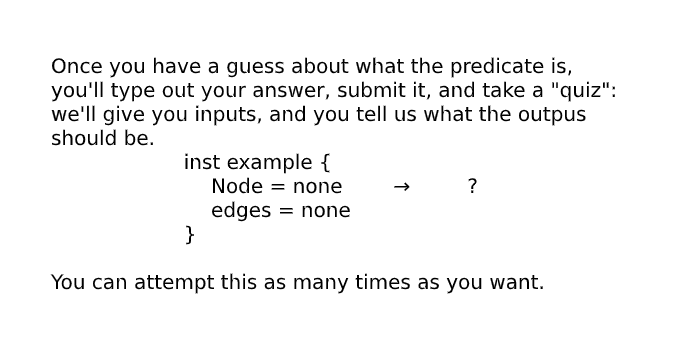
<style>
.page{position:relative;width:700px;height:350px;background:#ffffff}
.page>*{position:absolute;margin:0}
.t1{font:20px "DejaVuSans";color:#000000}
</style>
<div class="page">
<p class="t1" style="left:50px;top:57px;width:565px;height:237px">Once you have a guess about what the predicate is, <br>you'll type out your answer, submit it, and take a "quiz": <br>we'll give you inputs, and you tell us what the outpus <br>should be.<br>     inst example {<br>    Node = none        →         ?<br>    edges = none <br>     } <br><br>You can attempt this as many times as you want.</p>
</div>
